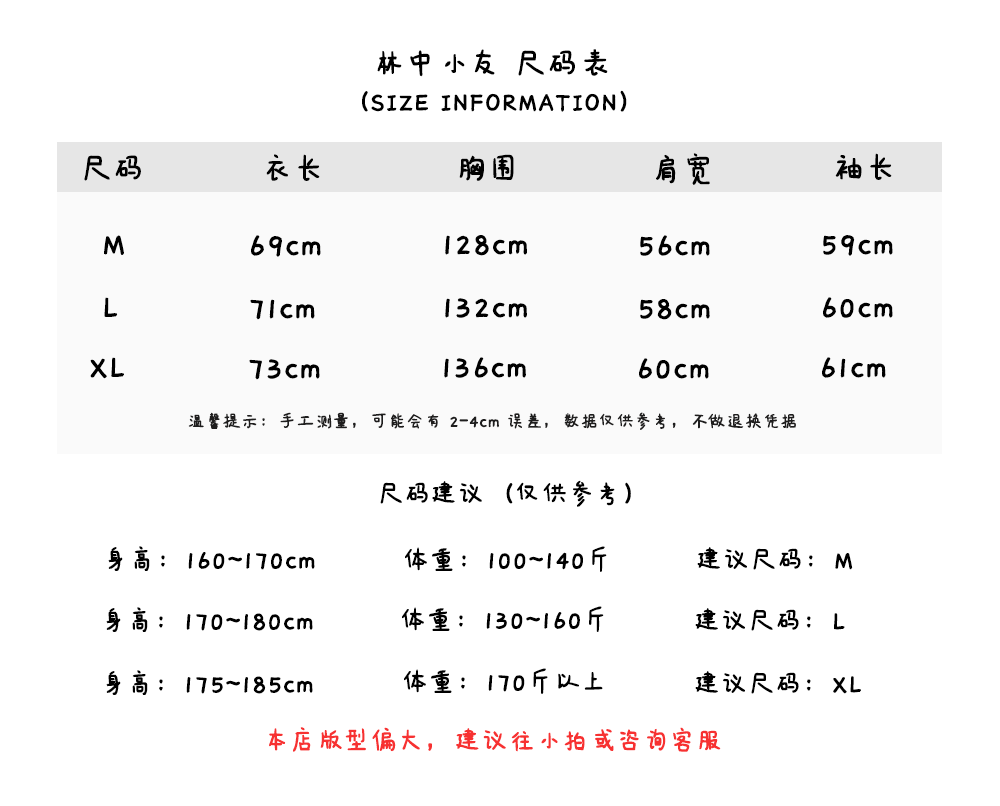
<style>
.page{position:relative;width:1000px;height:806px;background:#ffffff}
.page>*{position:absolute;margin:0}
.t1{font:36px "IdeaFonts-QianXiaTi";color:#000000;font-weight:bold}
.t2{font:30px "IdeaFonts-QianXiaTi";color:#000000;font-weight:bold}
.t3{font:20px "IdeaFonts-QianXiaTi";color:#1e1d1d;font-weight:bold}
.t4{font:30px "IdeaFonts-QianXiaTi";color:#f73131;font-weight:bold}
</style>
<div class="page">
<p class="t1" style="left:377px;top:49px;width:231px;height:28px">林中小友 尺码表</p>
<p class="t2" style="left:362px;top:90px;width:265px;height:22px">（SIZE INFORMATION）</p>
<p class="t1" style="left:84px;top:155px;width:57px;height:26px">尺码</p>
<p class="t1" style="left:266px;top:154px;width:54px;height:27px">衣长</p>
<p class="t1" style="left:459px;top:154px;width:55px;height:27px">胸围</p>
<p class="t1" style="left:656px;top:153px;width:54px;height:32px">肩宽</p>
<p class="t1" style="left:835px;top:153px;width:57px;height:27px">袖长</p>
<p class="t1" style="left:104px;top:235px;width:20px;height:20px">M</p>
<p class="t1" style="left:251px;top:235px;width:70px;height:22px">69cm</p>
<p class="t1" style="left:445px;top:235px;width:82px;height:21px">128cm</p>
<p class="t1" style="left:640px;top:235px;width:70px;height:21px">56cm</p>
<p class="t1" style="left:823px;top:235px;width:70px;height:21px">59cm</p>
<p class="t1" style="left:104px;top:297px;width:14px;height:20px">L</p>
<p class="t1" style="left:250px;top:299px;width:65px;height:21px">71cm</p>
<p class="t1" style="left:445px;top:298px;width:82px;height:20px">132cm</p>
<p class="t1" style="left:640px;top:299px;width:70px;height:21px">58cm</p>
<p class="t1" style="left:823px;top:297px;width:70px;height:21px">60cm</p>
<p class="t1" style="left:90px;top:357px;width:34px;height:22px">XL</p>
<p class="t1" style="left:249px;top:359px;width:71px;height:21px">73cm</p>
<p class="t1" style="left:444px;top:357px;width:82px;height:21px">136cm</p>
<p class="t1" style="left:639px;top:358px;width:70px;height:21px">60cm</p>
<p class="t1" style="left:822px;top:357px;width:64px;height:21px">61cm</p>
<p class="t3" style="left:188px;top:412px;width:608px;height:18px">温馨提示：手工测量，可能会有 2-4cm 误差，数据仅供参考，不做退换凭据</p>
<p class="t2" style="left:380px;top:480px;width:251px;height:27px">尺码建议（仅供参考）</p>
<p class="t2" style="left:108px;top:546px;width:207px;height:25px">身高：160~170cm</p>
<p class="t2" style="left:405px;top:546px;width:202px;height:26px">体重：100~140斤</p>
<p class="t2" style="left:697px;top:547px;width:156px;height:23px">建议尺码：M</p>
<p class="t2" style="left:402px;top:606px;width:202px;height:26px">体重：130~160斤</p>
<p class="t2" style="left:106px;top:607px;width:207px;height:25px">身高：170~180cm</p>
<p class="t2" style="left:695px;top:608px;width:150px;height:23px">建议尺码：L</p>
<p class="t2" style="left:106px;top:670px;width:207px;height:25px">身高：175~185cm</p>
<p class="t2" style="left:404px;top:668px;width:199px;height:26px">体重：170斤以上</p>
<p class="t2" style="left:695px;top:671px;width:166px;height:23px">建议尺码：XL</p>
<p class="t4" style="left:269px;top:727px;width:452px;height:25px">本店版型偏大，建议往小拍或咨询客服</p>
</div>
